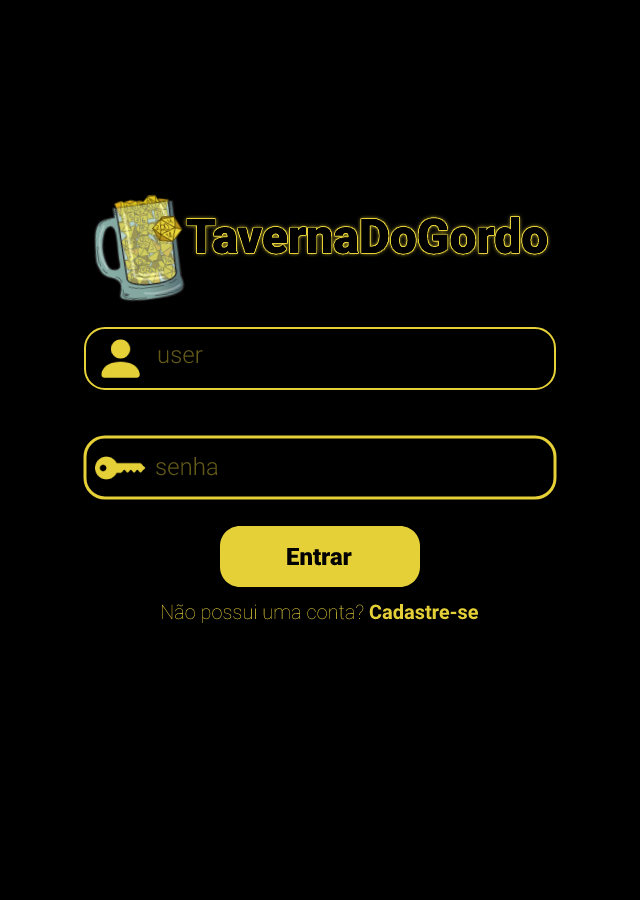
<style>
.page{position:relative;width:640px;height:900px;background:#000000}
.page>*{position:absolute;margin:0}
.t1{font:48px "Roboto-Black";color:#000000}
.t2{font:24px "Roboto-Light";color:#635a18}
.t3{font:24px "Roboto-Black";color:#000000}
.t4{font:20px "Roboto-Thin";color:#e5d038}
.t5{font:20px "Roboto-Bold";color:#e5d038}
</style>
<div class="page">
<p class="t1" style="left:186px;top:217px;width:361px;height:37px">TavernaDoGordo</p>
<p class="t2" style="left:158px;top:350px;width:45px;height:14px">user</p>
<p class="t2" style="left:156px;top:456px;width:62px;height:20px">senha</p>
<p class="t3" style="left:287px;top:548px;width:65px;height:18px">Entrar</p>
<p class="t4" style="left:162px;top:604px;width:316px;height:19px">Não possui uma conta? <span class="t5">Cadastre-se</span></p>
</div>
